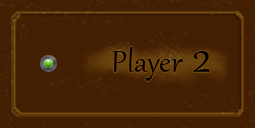
<style>
.page{position:relative;width:255px;height:128px;background:#421e02}
.page>*{position:absolute;margin:0}
.t1{font:37.5px "Gabriola";color:#000000}
.t2{font:58.3px "Gabriola";color:#000000}
</style>
<div class="page">
<p class="t1" style="left:111px;top:47px;width:72px;height:34px">Player</p>
<p class="t2" style="left:193px;top:51px;width:17px;height:21px">2</p>
</div>
